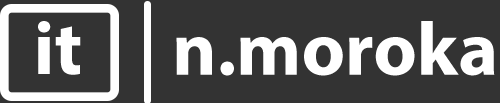
<style>
.page{position:relative;width:500px;height:103px;background:#333333}
.page>*{position:absolute;margin:0}
.t1{font:75.6px "MyriadPro-Bold";color:#ffffff}
</style>
<div class="page">
<p class="t1" style="left:38px;top:21px;width:43px;height:54px">it</p>
<p class="t1" style="left:176px;top:21px;width:319px;height:55px">n.moroka</p>
</div>
